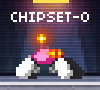
<style>
.page{position:relative;width:100px;height:90px}
.page>*{position:absolute;margin:0}
.t1{font:16px "04b03";color:#ffffff;text-transform:uppercase}
</style>
<div class="page">
<p class="t1" style="left:11px;top:12px;width:78px;height:10px">CHIPSET-0</p>
</div>
